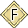
<style>
.page{position:relative;width:28px;height:28px;background:#ffffff}
.page>*{position:absolute;margin:0}
.t1{font:15.2px "LaoUI";color:#000000}
</style>
<div class="page">
<p class="t1" style="left:12px;top:9px;width:5px;height:11px">F</p>
</div>
